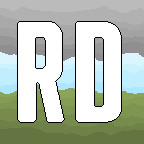
<style>
.page{position:relative;width:144px;height:144px;background:#ffffff}
.page>*{position:absolute;margin:0}
.t1{font:133.3px "BigNoodleTitling";letter-spacing:0.03em;color:#ffffff;font-weight:bold}
</style>
<div class="page">
<p class="t1" style="left:18px;top:22px;width:103px;height:100px">Rd</p>
</div>
